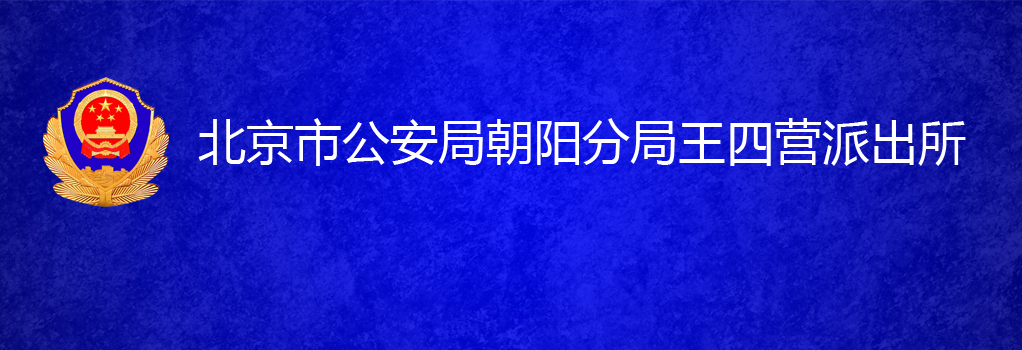
<style>
.page{position:relative;width:1022px;height:350px}
.page>*{position:absolute;margin:0}
.t1{font:48px "MicrosoftYaHei";color:#ffffff}
</style>
<div class="page">
<p class="t1" style="left:198px;top:118px;width:768px;height:48px">北京市公安局朝阳分局王四营派出所</p>
</div>
